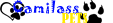
<style>
.page{position:relative;width:113px;height:23px;background:#ffffff}
.page>*{position:absolute;margin:0}
.t1{font:14.8px "Jokerman-Regular";letter-spacing:0.05em;color:#000cff}
.t2{font:13.2px "BernardMT-Condensed";letter-spacing:0.05em;color:#ffea00}
</style>
<div class="page">
<p class="t1" style="left:12px;top:0px;width:67px;height:14px">Camilass</p>
<p class="t2" style="left:62px;top:13px;width:26px;height:11px">PETS</p>
</div>
